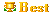
<style>
.page{position:relative;width:53px;height:14px;background:#ffffff}
.page>*{position:absolute;margin:0}
.t1{font:11px "Dotum";letter-spacing:-0.075em;color:#fdaa05;font-weight:bold}
.t2{font:11px "Dotum";letter-spacing:-0.075em;font-weight:bold}
</style>
<div class="page">
<p class="t1" style="left:30px;top:4px;width:18px;height:8px">est</p>
<p class="t2" style="left:31px;top:4px;width:18px;height:8px">est</p>
</div>
